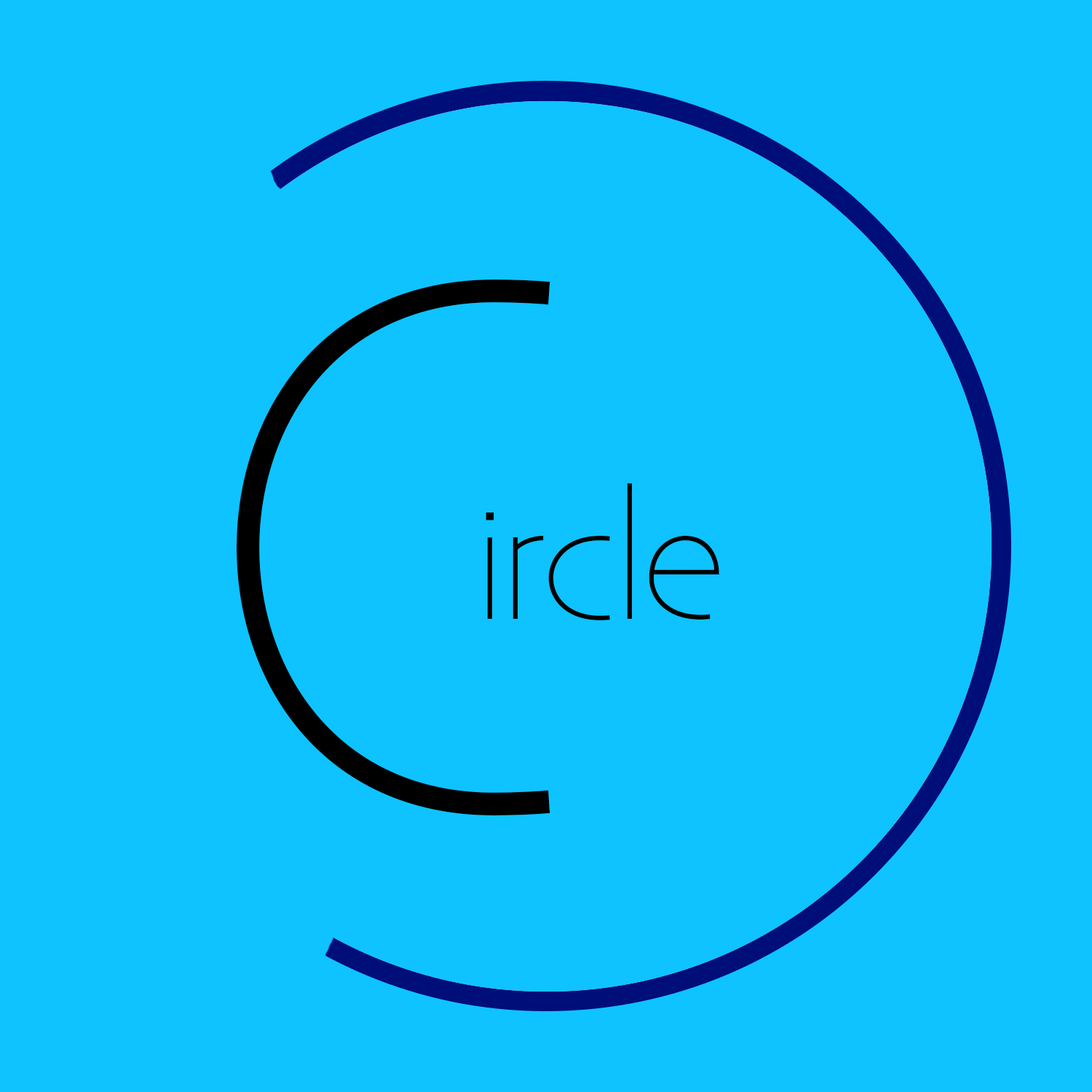
<style>
.page{position:relative;width:1092px;height:1092px;background:#0ec3ff}
.page>*{position:absolute;margin:0}
.t1{font:758.3px "Existence-Light";color:#000000}
.t2{font:151.7px "Existence-Light";color:#000000}
</style>
<div class="page">
<p class="t1" style="left:237px;top:279px;width:313px;height:536px">C</p>
<p class="t2" style="left:486px;top:483px;width:233px;height:137px">ircle</p>
</div>
